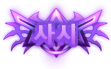
<style>
.page{position:relative;width:111px;height:69px;background:#ffffff}
.page>*{position:absolute;margin:0}
.t1{font:22px "MalgunGothicBold";font-weight:bold}
</style>
<div class="page">
<p class="t1" style="left:33px;top:23px;width:42px;height:22px">사시</p>
</div>
